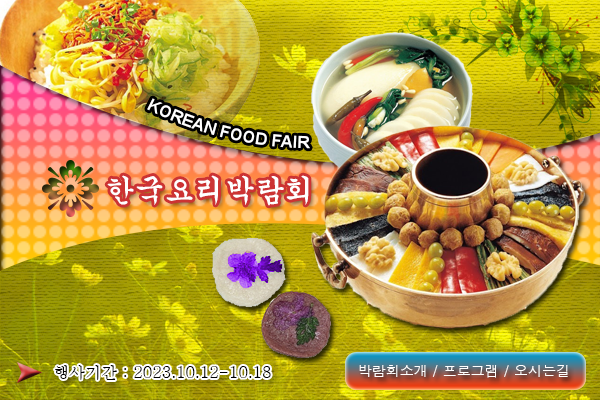
<style>
.page{position:relative;width:600px;height:400px}
.page>*{position:absolute;margin:0}
.t1{font:16px "Arial-BoldMT";color:#ffffff}
.t2{font:30px "Gungsuh";color:#ffffff}
.t3{font:16px "Batang";color:#010101}
.t4{font:14px "Dotum";color:#ffffff}
</style>
<div class="page">
<p class="t1" style="left:147px;top:98px;width:163px;height:51px;rotate:11deg">KOREAN FOOD FAIR</p>
<p class="t2" style="left:107px;top:175px;width:202px;height:31px">한국요리박람회</p>
<p class="t3" style="left:55px;top:365px;width:216px;height:15px">행사기간 : 2023.10.12-10.18</p>
<p class="t4" style="left:359px;top:365px;width:209px;height:13px">박람회소개 / 프로그램 / 오시는길</p>
</div>
